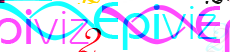
<style>
.page{position:relative;width:230px;height:52px;background:#ffffff}
.page>*{position:absolute;margin:0}
.t1{font:53px "BauhausITCbyBT-Medium";color:#12ffff;scale:1.05 1}
.t2{font:53px "BauhausITCbyBT-Light";color:#12ffff;scale:1.05 1}
</style>
<div class="page">
<p class="t1" style="left:93px;top:2px;width:124px;height:48px">Epi<span class="t2">viz</span></p>
</div>
